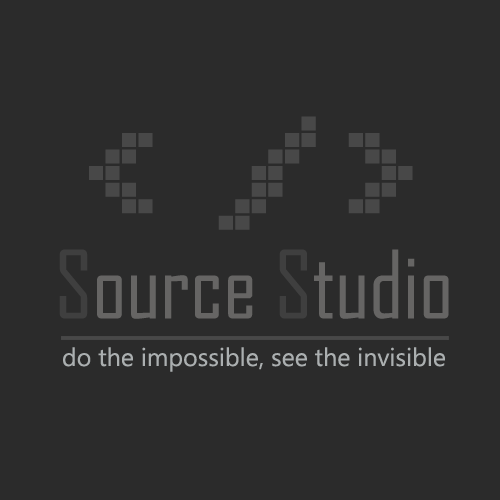
<style>
.page{position:relative;width:500px;height:500px;background:#2b2b2b}
.page>*{position:absolute;margin:0}
.t1{font:250px "Arcade";color:#484848}
.t2{font:90px "AgencyFB-Reg";color:#595857}
.t3{font:90px "AgencyFB-Reg";color:#1e1e1e}
.t4{font:25px "Ebrima";color:#abafb0}
</style>
<div class="page">
<p class="t1" style="left:89px;top:116px;width:324px;height:114px">&lt;/&gt;</p>
<p class="t2" style="left:59px;top:249px;width:390px;height:70px"><span class="t3">S</span>ource<span class="t3"> S</span>tudio</p>
<p class="t4" style="left:63px;top:347px;width:382px;height:25px">do the impossible, see the invisible</p>
</div>
